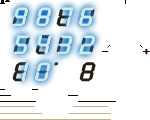
<style>
.page{position:relative;width:150px;height:120px;background:#ffffff}
.page>*{position:absolute;margin:0}
.t1{font:28px "TickingTimebombBB-Italic";color:#ceeaeb;font-weight:bold;scale:1.15 1}
.t2{font:28px "TickingTimebombBB-Italic";font-weight:bold;scale:1.15 1}
.t3{font:28px "TickingTimebombBB-Italic";color:#271d11;font-weight:bold;scale:1.15 1}
</style>
<div class="page">
<p class="t1" style="left:12px;top:7px;width:17px;height:20px">8</p>
<p class="t1" style="left:12px;top:7px;width:17px;height:20px">9</p>
<p class="t1" style="left:35px;top:7px;width:17px;height:20px">8</p>
<p class="t1" style="left:35px;top:7px;width:17px;height:20px">8</p>
<p class="t2" style="left:56px;top:7px;width:17px;height:20px">8</p>
<p class="t1" style="left:61px;top:7px;width:13px;height:20px">7</p>
<p class="t1" style="left:78px;top:7px;width:17px;height:20px">8</p>
<p class="t1" style="left:78px;top:7px;width:17px;height:20px">6</p>
<p class="t1" style="left:13px;top:35px;width:17px;height:20px">5</p>
<p class="t2" style="left:35px;top:35px;width:17px;height:20px">8</p>
<p class="t1" style="left:37px;top:35px;width:15px;height:20px">4</p>
<p class="t1" style="left:56px;top:35px;width:17px;height:20px">3</p>
<p class="t1" style="left:78px;top:35px;width:18px;height:20px">2</p>
<p class="t2" style="left:12px;top:62px;width:17px;height:20px">8</p>
<p class="t1" style="left:21px;top:62px;width:8px;height:20px">1</p>
<p class="t1" style="left:34px;top:62px;width:17px;height:20px">8</p>
<p class="t1" style="left:34px;top:62px;width:17px;height:20px">0</p>
<p class="t3" style="left:54px;top:62px;width:5px;height:4px">.</p>
<p class="t1" style="left:54px;top:58px;width:5px;height:4px">.</p>
<p class="t3" style="left:79px;top:62px;width:17px;height:20px">8</p>
</div>
